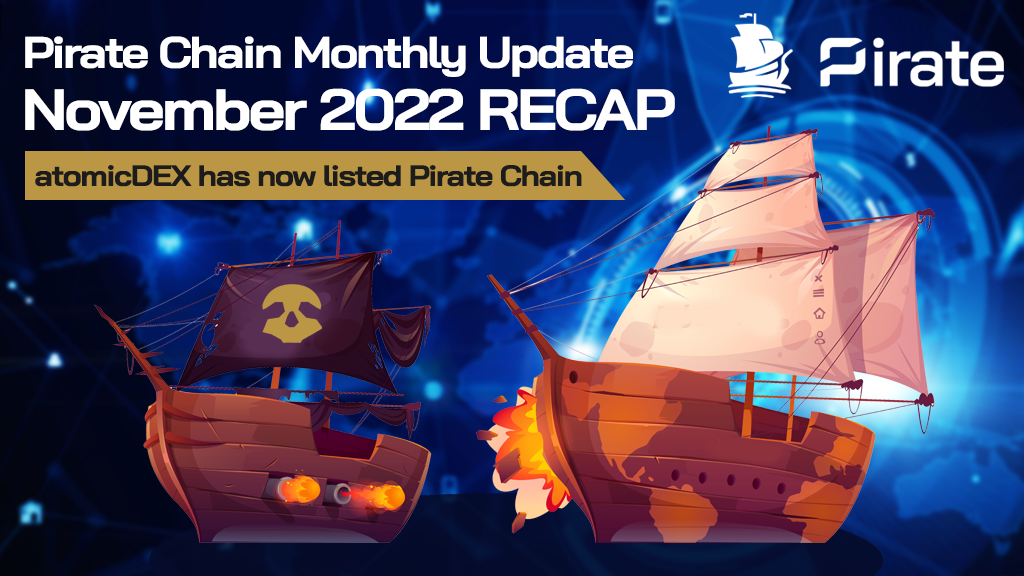
<style>
.page{position:relative;width:1024px;height:576px}
.page>*{position:absolute;margin:0}
.t1{font:44px "BaiJamjuree-Bold";letter-spacing:-0.05em;color:#ffffff;scale:1.1 1}
.t2{font:58px "BaiJamjuree-Bold";letter-spacing:-0.05em;color:#ffffff;scale:1.11 1}
.t3{font:58px "BaiJamjuree-Bold";letter-spacing:-0.05em;color:#ffffff;text-transform:uppercase;scale:1.11 1}
.t4{font:29.3px "BaiJamjuree-Bold";letter-spacing:-0.05em;color:#1d1c1c;scale:1.11 1}
</style>
<div class="page">
<p class="t1" style="left:25px;top:36px;width:608px;height:41px">Pirate Chain Monthly Update</p>
<p class="t2" style="left:25px;top:88px;width:650px;height:43px">November 2022 <span class="t3">recap</span></p>
<p class="t4" style="left:35px;top:165px;width:547px;height:22px">atomicDEX has now listed Pirate Chain</p>
</div>
